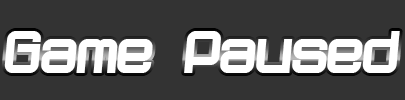
<style>
.page{position:relative;width:405px;height:100px;background:#333333}
.page>*{position:absolute;margin:0}
.t1{font:64.1px "Dopenakedfoulphatrelaxed";color:#ffffff}
</style>
<div class="page">
<p class="t1" style="left:4px;top:31px;width:396px;height:42px">Game Paused</p>
</div>
